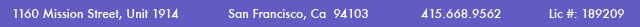
<style>
.page{position:relative;width:640px;height:27px;background:#625bc4}
.page>*{position:absolute;margin:0}
.t1{font:12px "Futura-Medium";color:#ffffff}
</style>
<div class="page">
<p class="t1" style="left:13px;top:8px;width:166px;height:12px">1160 Mission Street, Unit 1914</p>
<p class="t1" style="left:228px;top:8px;width:140px;height:12px">San Francisco, Ca  94103</p>
<p class="t1" style="left:421px;top:8px;width:80px;height:10px">415.668.9562</p>
<p class="t1" style="left:549px;top:9px;width:75px;height:9px">Lic #: 189209</p>
</div>
